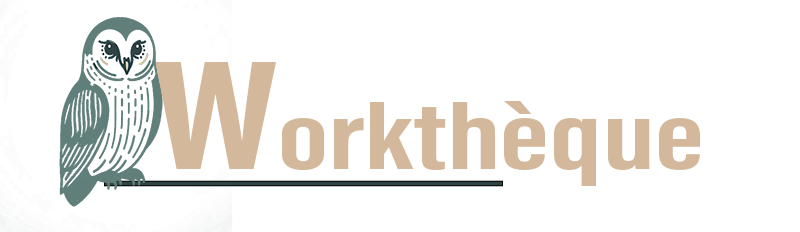
<style>
.page{position:relative;width:800px;height:232px;background:#ffffff}
.page>*{position:absolute;margin:0}
.t1{font:96px "AcuminProExtraCond-Bold";color:#d3b89b;scale:1.44 1}
.t2{font:160px "AcuminProExtraCond-Bold";color:#d3b89b;scale:1.44 1}
</style>
<div class="page">
<p class="t1" style="left:155px;top:62px;width:545px;height:124px"><span class="t2">W</span>orkthèque</p>
</div>
